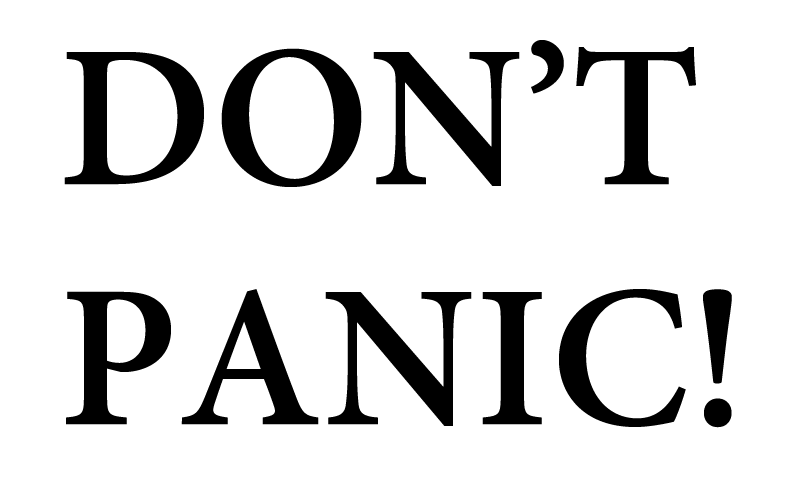
<style>
.page{position:relative;width:800px;height:500px;background:#ffffff}
.page>*{position:absolute;margin:0}
.t1{font:200px "AdobeHebrew-Bold";color:#000000}
</style>
<div class="page">
<p class="t1" style="left:64px;top:40px;width:668px;height:388px">DON’T<br>PANIC!</p>
</div>
